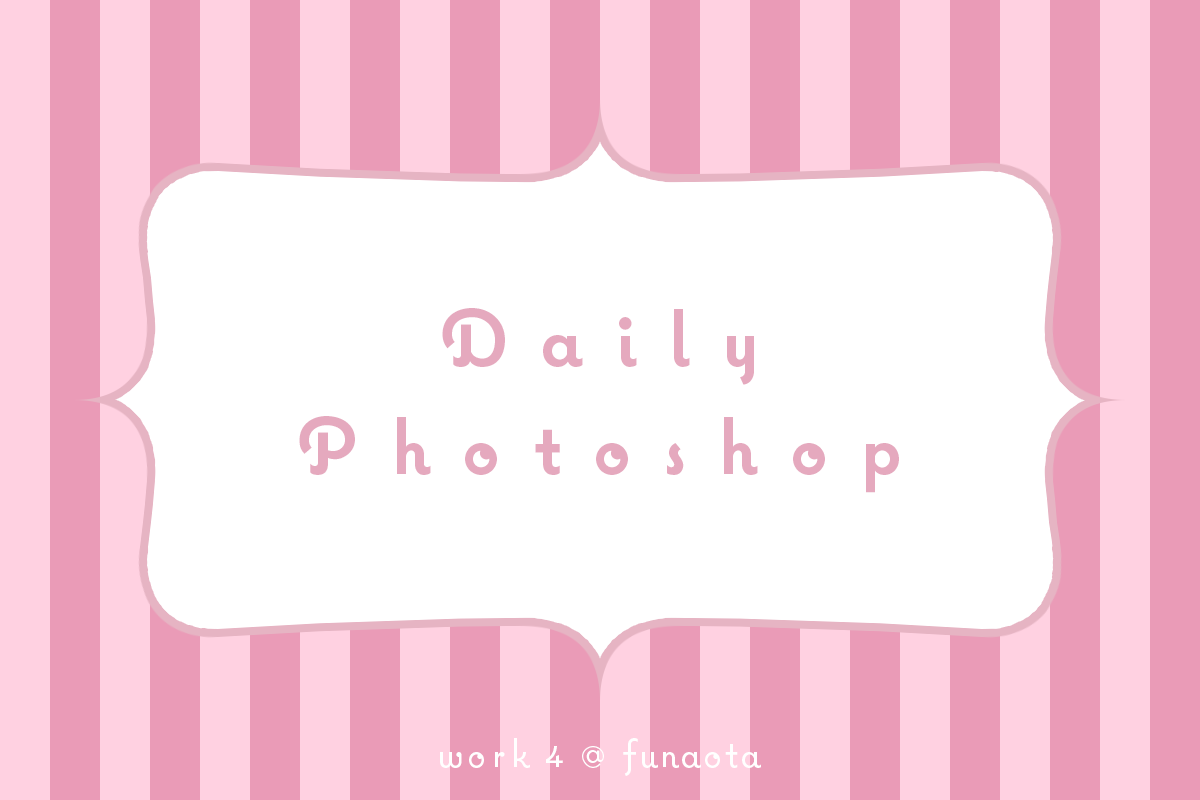
<style>
.page{position:relative;width:1200px;height:800px;background:#ffffff}
.page>*{position:absolute;margin:0}
.t1{font:80px/108px "Coquette-Bold";letter-spacing:0.4em;color:#e5a9be}
.t2{font:40px "Coquette";letter-spacing:0.4em;color:#ffffff}
</style>
<div class="page">
<p class="t1" style="left:299px;top:308px;width:600px;height:185px;text-align:center">Daily<br>Photoshop</p>
<p class="t2" style="left:440px;top:738px;width:321px;height:38px">work4@funaota</p>
</div>
